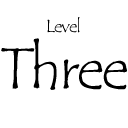
<style>
.page{position:relative;width:128px;height:128px;background:#ffffff}
.page>*{position:absolute;margin:0}
.t1{font:18px "TempusSansITC";letter-spacing:-0.04em;color:#000000}
.t2{font:60.1px "TempusSansITC";letter-spacing:-0.04em;color:#000000}
</style>
<div class="page">
<p class="t1" style="left:47px;top:17px;width:33px;height:16px">Level</p>
<p class="t2" style="left:1px;top:38px;width:126px;height:52px">Three</p>
</div>
